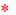
<style>
.page{position:relative;width:16px;height:15px;background:#ffffff}
.page>*{position:absolute;margin:0}
.t1{font:18.8px "TimesNewRomanPSMT";color:#ff0000;scale:1.06 1}
</style>
<div class="page">
<p class="t1" style="left:1px;top:4px;width:8px;height:8px">*</p>
</div>
